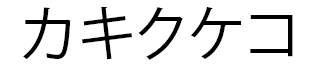
<style>
.page{position:relative;width:320px;height:64px;background:#ffffff}
.page>*{position:absolute;margin:0}
.t1{font:60px "KozGoPr6N-Regular";color:#000000}
</style>
<div class="page">
<p class="t1" style="left:23px;top:6px;width:270px;height:54px">カキクケコ</p>
</div>
